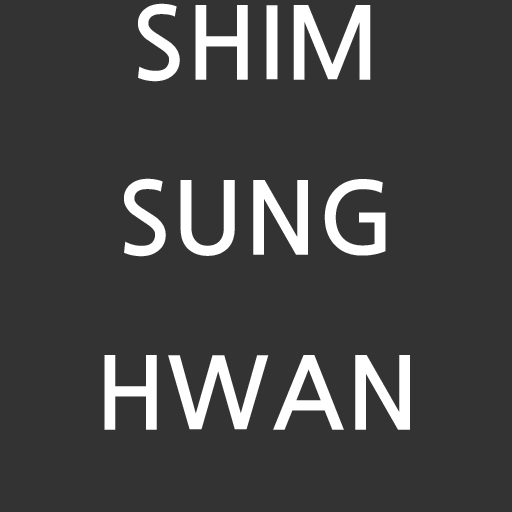
<style>
.page{position:relative;width:512px;height:512px;background:#333333}
.page>*{position:absolute;margin:0}
.t1{font:100px "JejuGothic";color:#ffffff}
</style>
<div class="page">
<p class="t1" style="left:104px;top:3px;width:306px;height:427px;text-align:center">SHIM<br>SUNG<br>HWAN</p>
</div>
